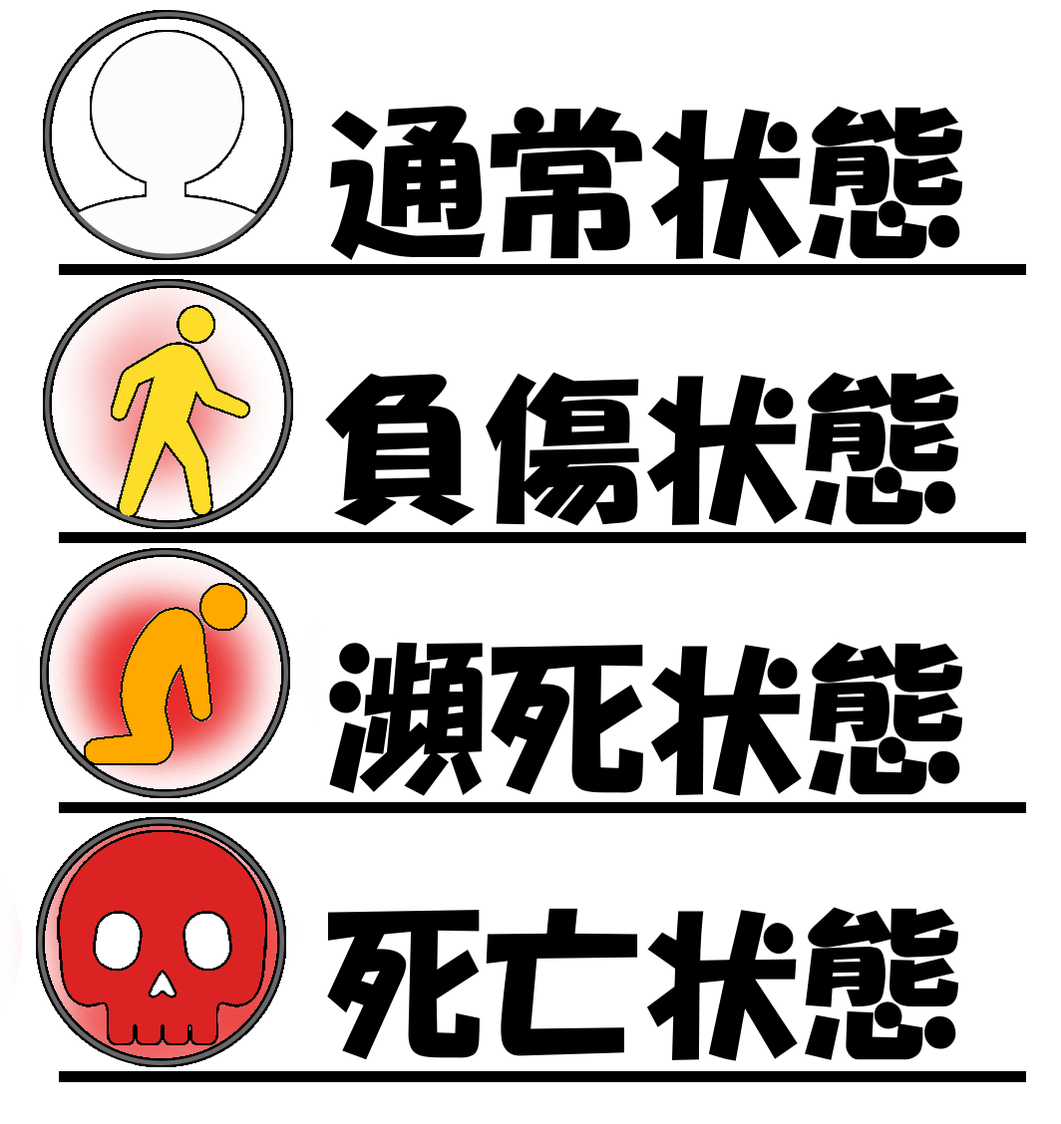
<style>
.page{position:relative;width:1061px;height:1124px;background:#ffffff}
.page>*{position:absolute;margin:0}
.t1{font:159.5px "HGSoeiKakupoptai";color:#000000}
</style>
<div class="page">
<p class="t1" style="left:330px;top:106px;width:632px;height:154px">通常状態</p>
<p class="t1" style="left:325px;top:372px;width:633px;height:154px">負傷状態</p>
<p class="t1" style="left:329px;top:642px;width:633px;height:154px">瀕死状態</p>
<p class="t1" style="left:327px;top:907px;width:631px;height:155px">死亡状態</p>
</div>
